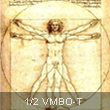
<style>
.page{position:relative;width:110px;height:110px}
.page>*{position:absolute;margin:0}
.t1{font:10px "ArialMT";color:#e3e1d8}
</style>
<div class="page">
<p class="t1" style="left:25px;top:98px;width:57px;height:7px">1/2 VMBO-T</p>
</div>
